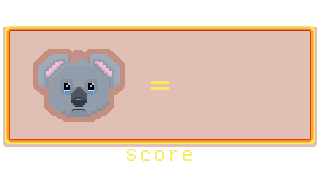
<style>
.page{position:relative;width:320px;height:170px;background:#e0bfb5}
.page>*{position:absolute;margin:0}
.t1{font:24px "Dogica";color:#fbe95b}
.t2{font:14px "Dogica";color:#fbe95b}
</style>
<div class="page">
<p class="t1" style="left:151px;top:81px;width:18px;height:9px">=</p>
<p class="t2" style="left:127px;top:149px;width:65px;height:12px">Score</p>
</div>
